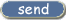
<style>
.page{position:relative;width:66px;height:20px;background:#547098}
.page>*{position:absolute;margin:0}
.t1{font:14.2px "ComicSansMS";color:#ffffff}
</style>
<div class="page">
<p class="t1" style="left:18px;top:3px;width:31px;height:12px">send</p>
</div>
